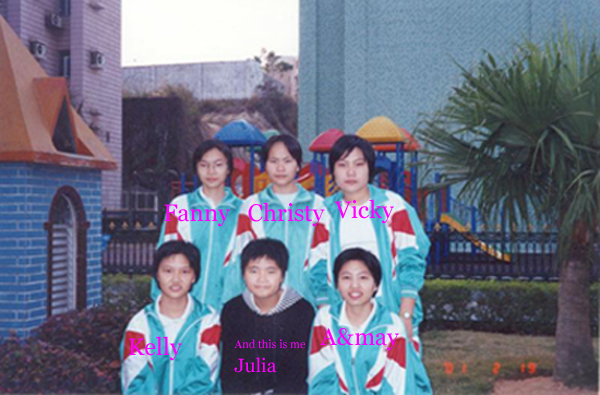
<style>
.page{position:relative;width:600px;height:395px}
.page>*{position:absolute;margin:0}
.t1{font:24.1px "Georgia";color:#ff00ff}
.t2{font:11.2px "Georgia";color:#ff00ff}
.t3{font:19.3px "Georgia";color:#ff00ff}
</style>
<div class="page">
<p class="t1" style="left:164px;top:204px;width:66px;height:23px">Fanny</p>
<p class="t1" style="left:248px;top:202px;width:77px;height:25px">Christy</p>
<p class="t1" style="left:334px;top:199px;width:60px;height:25px">Vicky</p>
<p class="t1" style="left:320px;top:328px;width:79px;height:23px">A&amp;may</p>
<p class="t1" style="left:128px;top:336px;width:54px;height:25px">Kelly</p>
<p class="t2" style="left:234px;top:339px;width:72px;height:34px">And this is me<br><span class="t3">Julia</span></p>
</div>
